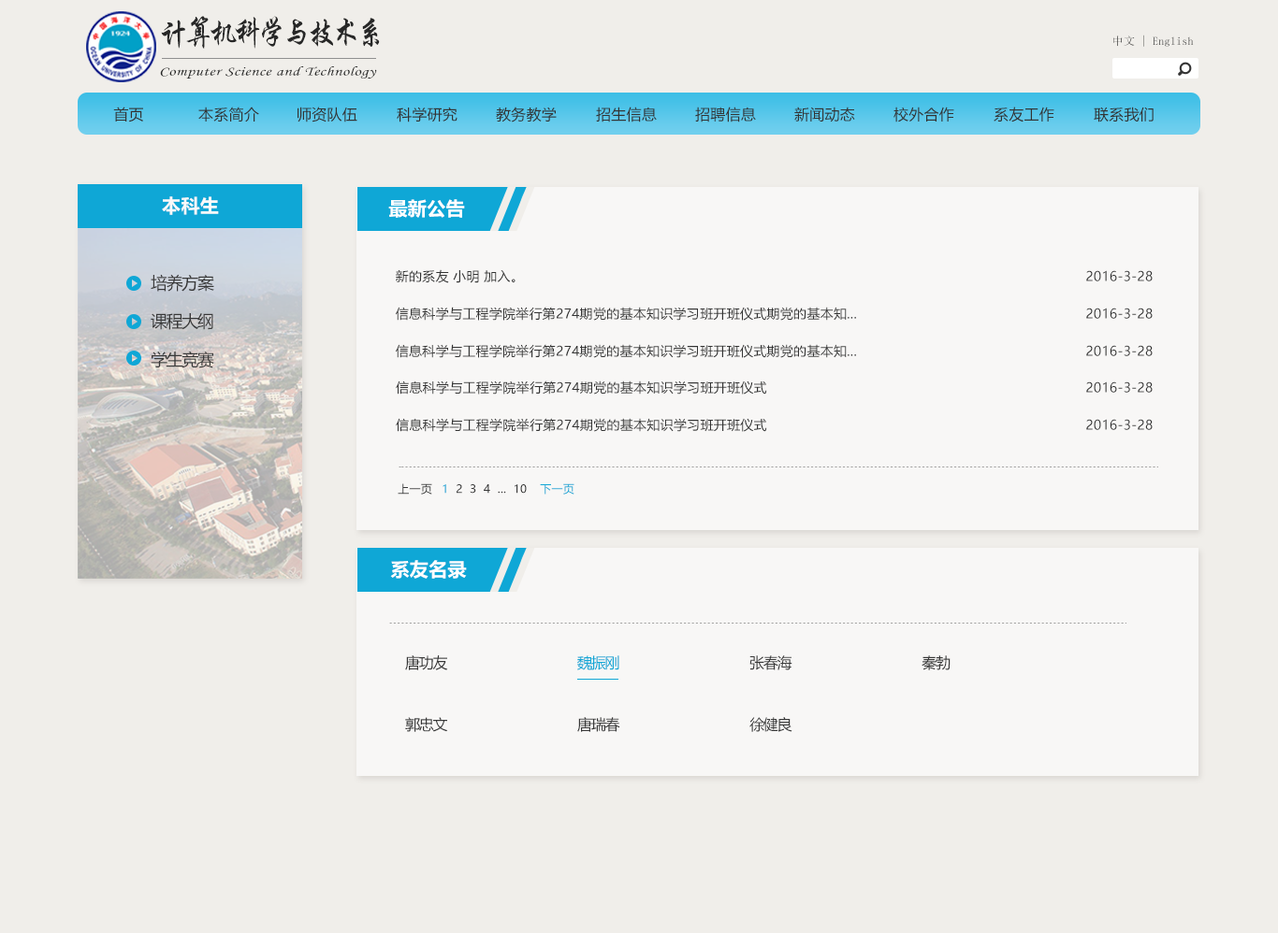
<style>
.page{position:relative;width:1278px;height:933px;background:#f0eeea}
.page>*{position:absolute;margin:0}
.t1{font:32.6px "STXingkai";letter-spacing:-0.14em;color:#272727;scale:0.88 1}
.t2{font:11.2px "SimSun";letter-spacing:0.02em}
.t3{font:12.9px "STLiti";letter-spacing:0.02em;color:#272727;scale:1.34 1}
.t4{font:15px "MicrosoftYaHei";letter-spacing:0.02em;color:#333333}
.t5{font:18.7px "MicrosoftYaHei-Bold";letter-spacing:0.02em;color:#f9f9f9}
.t6{font:18.7px "MicrosoftYaHei-Bold";letter-spacing:0.02em;color:#ffffff}
.t7{font:13.1px "MicrosoftYaHei";letter-spacing:0.02em;color:#333333}
.t8{font:16.8px "MicrosoftYaHei";letter-spacing:-0.076em;color:#383838}
.t9{font:11.2px "MicrosoftYaHei";letter-spacing:0.02em;color:#383838}
.t10{font:11.2px "MicrosoftYaHei";letter-spacing:0.02em;color:#0fa7d6}
.t11{font:15px "MicrosoftYaHei";letter-spacing:-0.076em;color:#383838}
.t12{font:15px "MicrosoftYaHei";letter-spacing:-0.076em;color:#0fa7d6}
</style>
<div class="page">
<p class="t1" style="left:161px;top:16px;width:219px;height:33px">计算机科学与技术系</p>
<p class="t2" style="left:1113px;top:35px;width:80px;height:12px">中文 | English</p>
<p class="t3" style="left:160px;top:66px;width:217px;height:13px">Computer Science and Technology</p>
<p class="t4" style="left:113px;top:107px;width:30px;height:16px">首页</p>
<p class="t4" style="left:198px;top:107px;width:61px;height:16px">本系简介</p>
<p class="t4" style="left:297px;top:107px;width:60px;height:16px">师资队伍</p>
<p class="t4" style="left:397px;top:107px;width:60px;height:16px">科学研究</p>
<p class="t4" style="left:496px;top:107px;width:60px;height:16px">教务教学</p>
<p class="t4" style="left:596px;top:107px;width:61px;height:16px">招生信息</p>
<p class="t4" style="left:695px;top:107px;width:61px;height:16px">招聘信息</p>
<p class="t4" style="left:794px;top:107px;width:61px;height:16px">新闻动态</p>
<p class="t4" style="left:893px;top:107px;width:61px;height:16px">校外合作</p>
<p class="t4" style="left:993px;top:107px;width:61px;height:16px">系友工作</p>
<p class="t4" style="left:1093px;top:107px;width:60px;height:16px">联系我们</p>
<p class="t5" style="left:162px;top:196px;width:57px;height:19px">本科生</p>
<p class="t6" style="left:388px;top:199px;width:77px;height:19px">最新公告</p>
<p class="t7" style="left:396px;top:269px;width:119px;height:14px">新的系友 小明 加入。</p>
<p class="t8" style="left:151px;top:274px;width:63px;height:18px">培养方案</p>
<p class="t7" style="left:1086px;top:270px;width:66px;height:12px">2016-3-28</p>
<p class="t8" style="left:151px;top:313px;width:62px;height:17px">课程大纲</p>
<p class="t7" style="left:396px;top:307px;width:460px;height:14px">信息科学与工程学院举行第274期党的基本知识学习班开班仪式期党的基本知...</p>
<p class="t7" style="left:1086px;top:308px;width:66px;height:11px">2016-3-28</p>
<p class="t8" style="left:151px;top:351px;width:63px;height:17px">学生竞赛</p>
<p class="t7" style="left:396px;top:344px;width:460px;height:14px">信息科学与工程学院举行第274期党的基本知识学习班开班仪式期党的基本知...</p>
<p class="t7" style="left:1086px;top:345px;width:66px;height:11px">2016-3-28</p>
<p class="t7" style="left:396px;top:381px;width:371px;height:14px">信息科学与工程学院举行第274期党的基本知识学习班开班仪式</p>
<p class="t7" style="left:1086px;top:382px;width:66px;height:11px">2016-3-28</p>
<p class="t7" style="left:396px;top:418px;width:371px;height:14px">信息科学与工程学院举行第274期党的基本知识学习班开班仪式</p>
<p class="t7" style="left:1086px;top:419px;width:66px;height:11px">2016-3-28</p>
<p class="t9" style="left:397px;top:484px;width:35px;height:11px">上一页</p>
<p class="t9" style="left:442px;top:484px;width:85px;height:10px"><span class="t10">1</span>  2  3  4  ...  10</p>
<p class="t10" style="left:540px;top:484px;width:34px;height:11px">下一页</p>
<p class="t6" style="left:390px;top:560px;width:77px;height:19px">系友名录</p>
<p class="t11" style="left:405px;top:656px;width:43px;height:15px">唐功友</p>
<p class="t12" style="left:577px;top:656px;width:42px;height:15px">魏振刚</p>
<p class="t11" style="left:749px;top:656px;width:43px;height:15px">张春海</p>
<p class="t11" style="left:921px;top:656px;width:29px;height:15px">秦勃</p>
<p class="t11" style="left:405px;top:717px;width:43px;height:15px">郭忠文</p>
<p class="t11" style="left:577px;top:717px;width:43px;height:15px">唐瑞春</p>
<p class="t11" style="left:749px;top:717px;width:43px;height:15px">徐健良</p>
</div>
